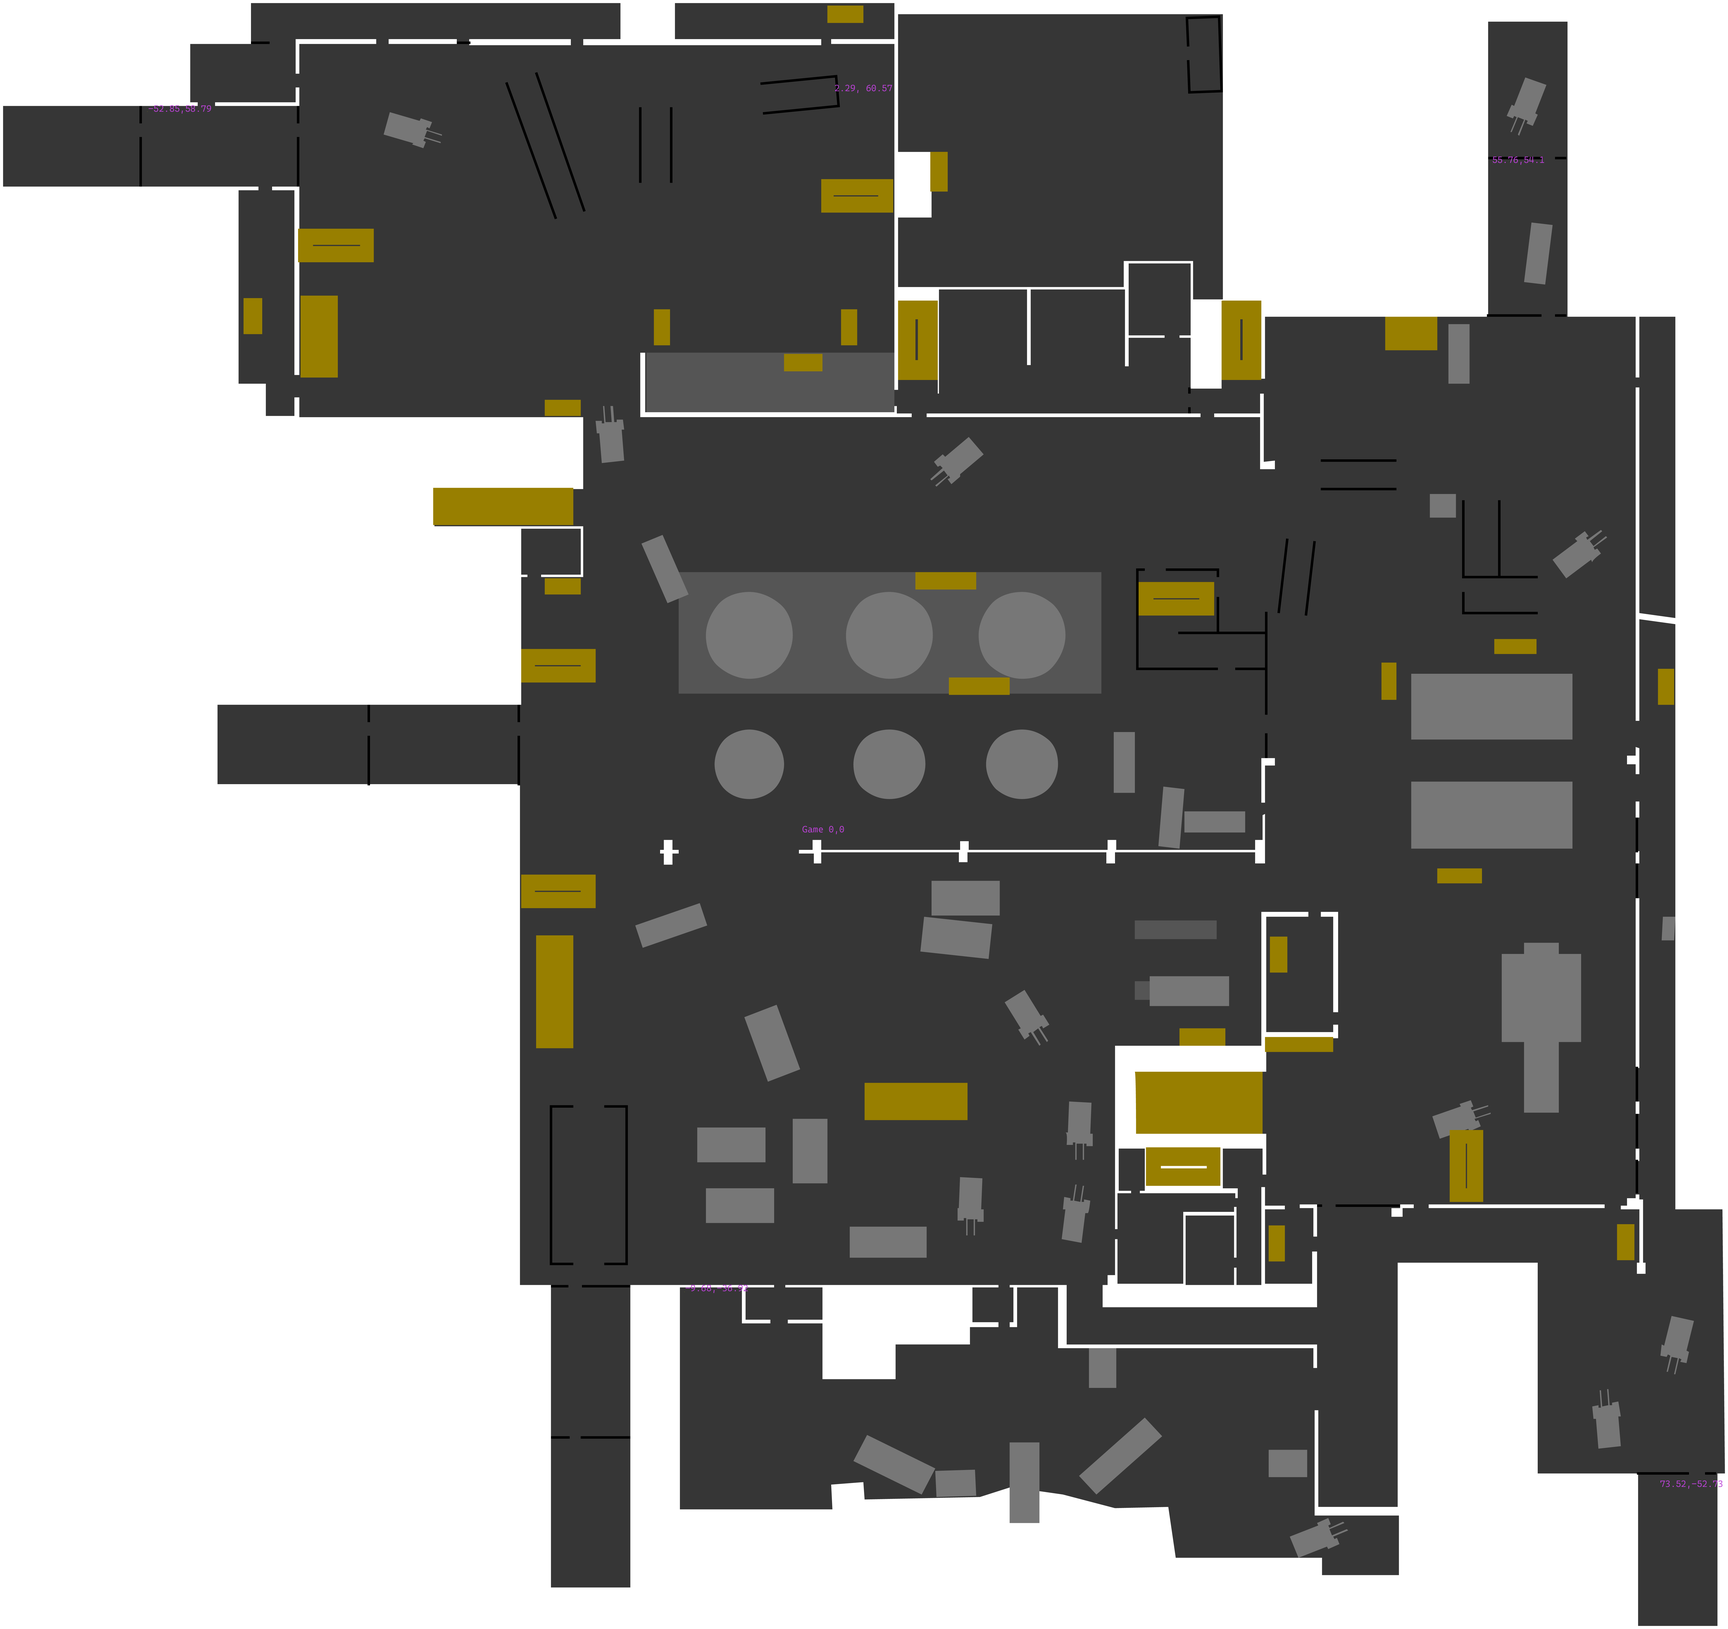
<style>
.page{position:relative;width:1728px;height:1629px;background:#363636}
.page>*{position:absolute;margin:0}
.t1{font:9px "CascadiaMonoRoman-SemiLight";color:#bb42d6}
</style>
<div class="page">
<p class="t1" style="left:835px;top:85px;width:57px;height:8px">2.29, 60.57</p>
<p class="t1" style="left:149px;top:105px;width:62px;height:9px">-52.85,58.79</p>
<p class="t1" style="left:1493px;top:156px;width:51px;height:9px">55.76,54.1</p>
<p class="t1" style="left:802px;top:826px;width:42px;height:8px">Game 0,0</p>
<p class="t1" style="left:686px;top:1285px;width:62px;height:8px">-9.68,-36.92</p>
<p class="t1" style="left:1660px;top:1480px;width:62px;height:9px">73.52,-52.73</p>
</div>
